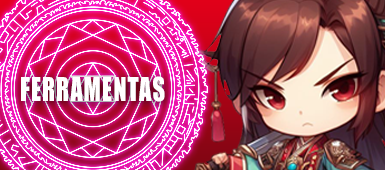
<style>
.page{position:relative;width:385px;height:170px}
.page>*{position:absolute;margin:0}
.t1{font:30.2px "Impact";letter-spacing:0.05em;color:#ffffff;scale:0.8 1}
</style>
<div class="page">
<p class="t1" style="left:21px;top:76px;width:144px;height:26px">FERRAMENTAS</p>
</div>
